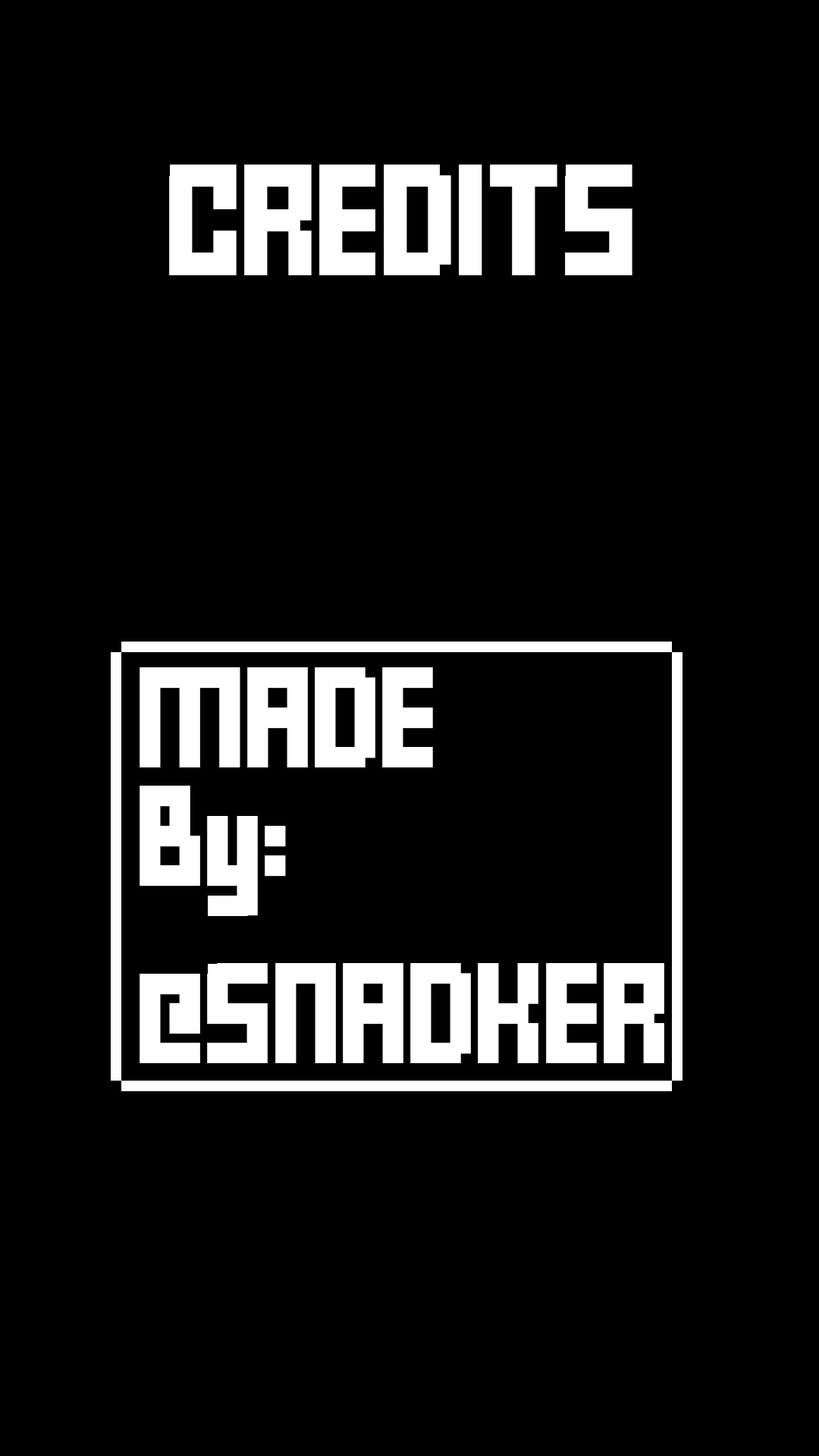
<style>
.page{position:relative;width:819px;height:1456px;background:#000000}
.page>*{position:absolute;margin:0}
.t1{font:151.7px "FFFForward";letter-spacing:-0.025em;color:#ffffff}
.t2{font:136.5px/59.1px "FFFForward";letter-spacing:-0.025em;color:#ffffff}
</style>
<div class="page">
<p class="t1" style="left:169px;top:165px;width:463px;height:110px">CREDITS</p>
<p class="t2" style="left:140px;top:667px;width:524px;height:396px">MADE<br><br>By:<br><br><br>@SNADKER</p>
</div>
